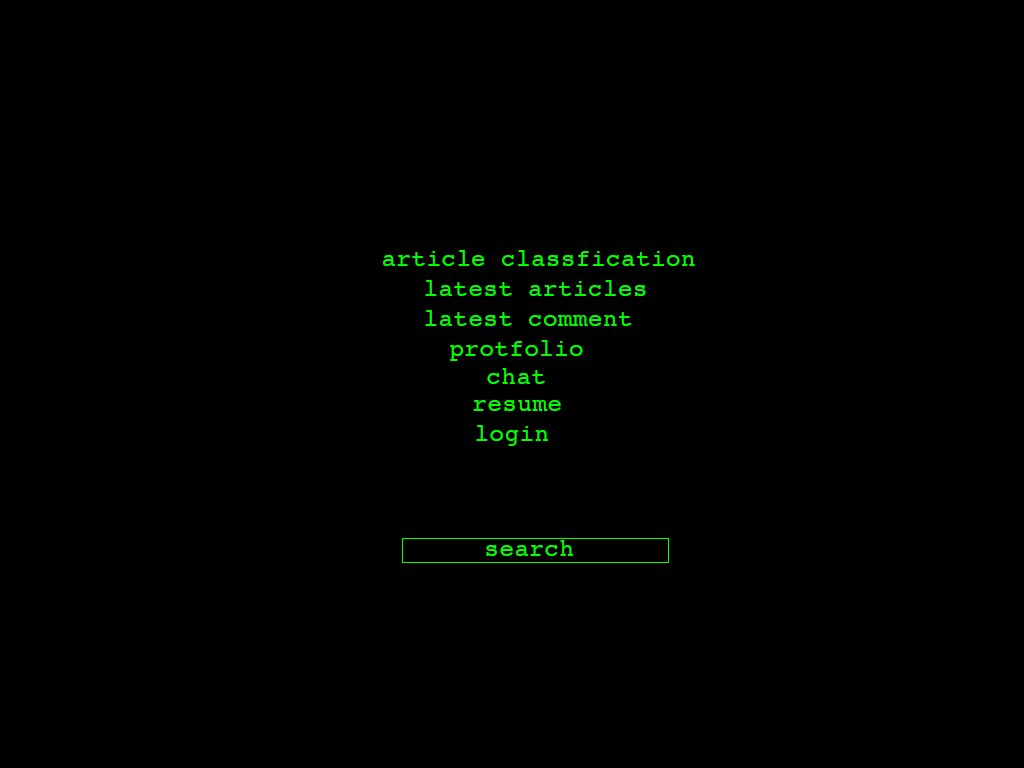
<style>
.page{position:relative;width:1024px;height:768px;background:#000000}
.page>*{position:absolute;margin:0}
.t1{font:24px "Courier";letter-spacing:0.024em;color:#00ff00}
</style>
<div class="page">
<p class="t1" style="left:383px;top:250px;width:312px;height:16px">article classfication</p>
<p class="t1" style="left:425px;top:280px;width:221px;height:16px">latest articles</p>
<p class="t1" style="left:425px;top:310px;width:207px;height:16px">latest comment</p>
<p class="t1" style="left:450px;top:340px;width:133px;height:21px">protfolio</p>
<p class="t1" style="left:487px;top:368px;width:58px;height:16px">chat</p>
<p class="t1" style="left:473px;top:400px;width:88px;height:11px">resume</p>
<p class="t1" style="left:476px;top:425px;width:72px;height:21px">login</p>
<p class="t1" style="left:486px;top:540px;width:87px;height:16px">search</p>
</div>
